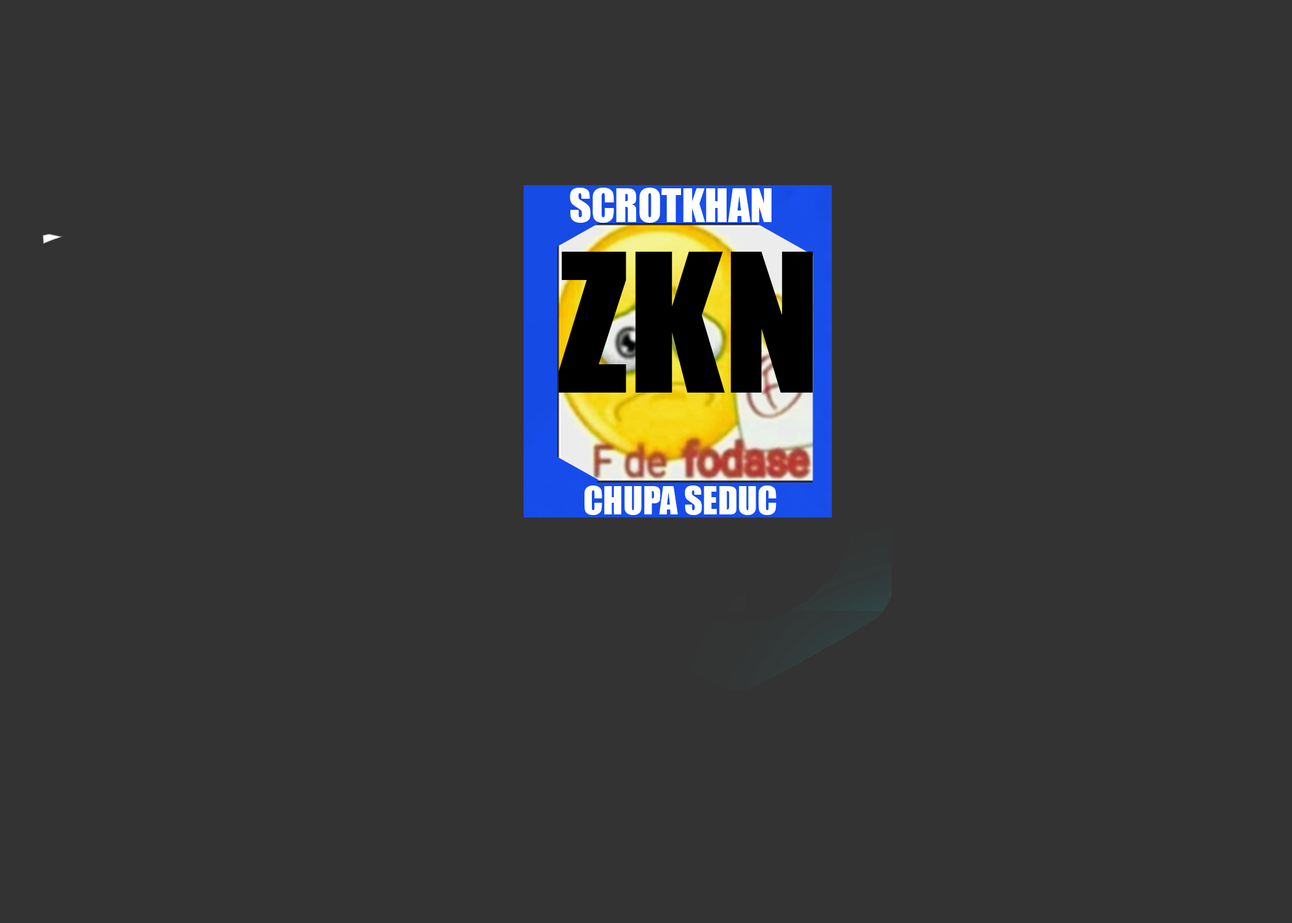
<style>
.page{position:relative;width:1292px;height:923px;background:#333333}
.page>*{position:absolute;margin:0}
.t1{font:43px "Impact";color:#ffffff}
.t2{font:178.2px "Impact";color:#000000}
.t3{font:35.9px "Impact";color:#ffffff}
</style>
<div class="page">
<p class="t1" style="left:570px;top:188px;width:202px;height:35px">SCROTKHAN</p>
<p class="t2" style="left:558px;top:252px;width:255px;height:141px">ZKN</p>
<p class="t3" style="left:585px;top:485px;width:191px;height:30px">CHUPA SEDUC</p>
</div>
